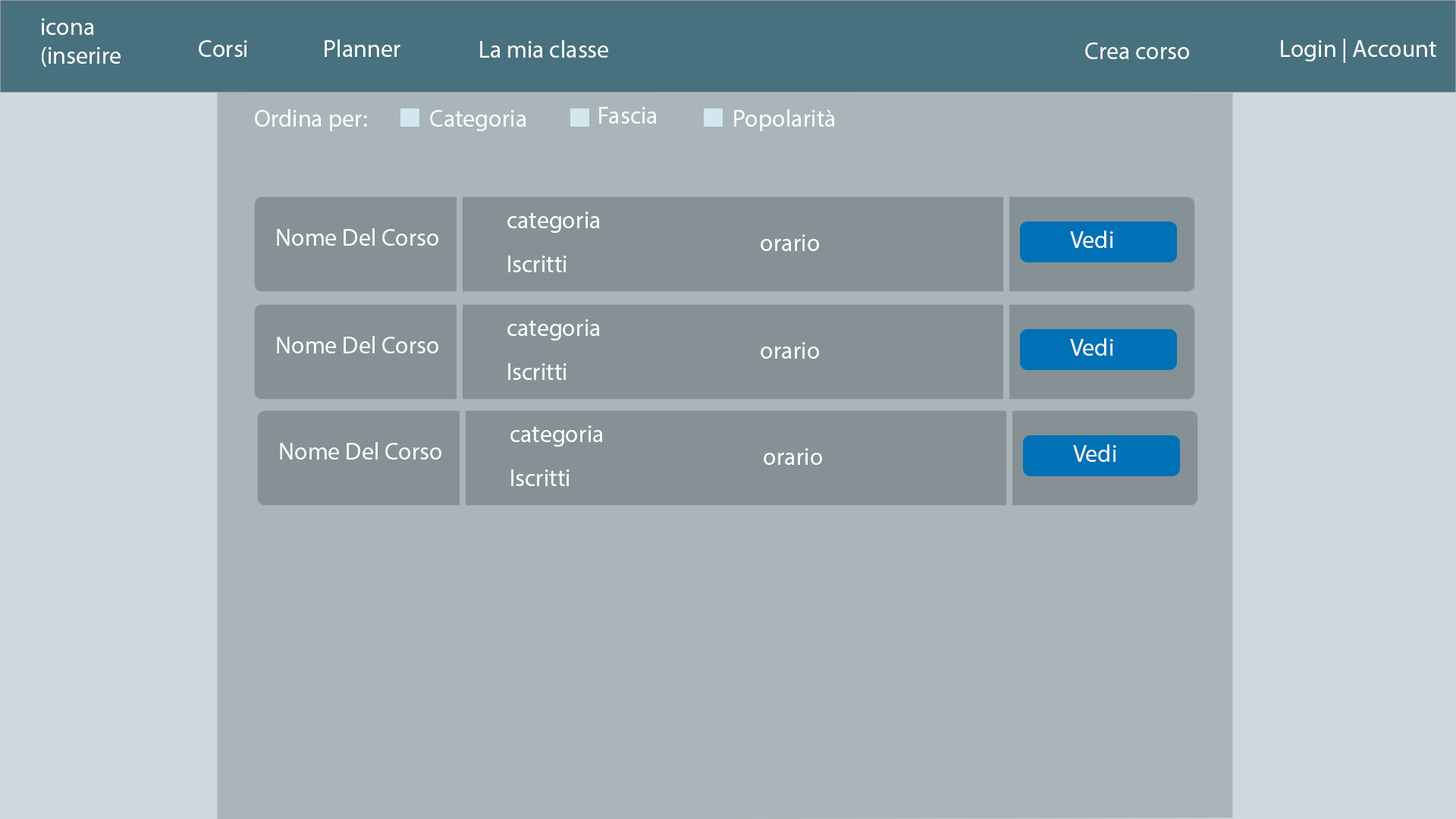
<style>
.page{position:relative;width:1456px;height:819px;background:#a9b5b8}
.page>*{position:absolute;margin:0}
.t1{font:24.3px "MyriadPro-Regular";color:#ffffff}
</style>
<div class="page">
<p class="t1" style="left:42px;top:18px;width:79px;height:49px">icona (inserire</p>
<p class="t1" style="left:199px;top:40px;width:48px;height:17px">Corsi</p>
<p class="t1" style="left:325px;top:39px;width:75px;height:18px">Planner</p>
<p class="t1" style="left:480px;top:40px;width:128px;height:18px">La mia classe</p>
<p class="t1" style="left:1281px;top:39px;width:155px;height:24px">Login | Account</p>
<p class="t1" style="left:1085px;top:42px;width:104px;height:17px">Crea corso</p>
<p class="t1" style="left:255px;top:109px;width:112px;height:22px">Ordina per:</p>
<p class="t1" style="left:430px;top:110px;width:96px;height:21px">Categoria</p>
<p class="t1" style="left:599px;top:107px;width:58px;height:17px">Fascia</p>
<p class="t1" style="left:734px;top:109px;width:101px;height:22px">Popolarità</p>
<p class="t1" style="left:507px;top:212px;width:93px;height:21px">categoria</p>
<p class="t1" style="left:277px;top:228px;width:161px;height:18px">Nome Del Corso<br><br>N§N</p>
<p class="t1" style="left:1070px;top:231px;width:43px;height:17px">Vedi</p>
<p class="t1" style="left:761px;top:234px;width:58px;height:17px">orario</p>
<p class="t1" style="left:508px;top:256px;width:58px;height:16px">Iscritti</p>
<p class="t1" style="left:507px;top:319px;width:93px;height:21px">categoria</p>
<p class="t1" style="left:277px;top:336px;width:161px;height:17px">Nome Del Corso<br><br>N§N</p>
<p class="t1" style="left:1070px;top:338px;width:43px;height:18px">Vedi</p>
<p class="t1" style="left:761px;top:342px;width:58px;height:17px">orario</p>
<p class="t1" style="left:508px;top:363px;width:58px;height:17px">Iscritti</p>
<p class="t1" style="left:510px;top:425px;width:93px;height:22px">categoria</p>
<p class="t1" style="left:280px;top:442px;width:161px;height:18px">Nome Del Corso<br><br>N§N</p>
<p class="t1" style="left:764px;top:448px;width:58px;height:17px">orario</p>
<p class="t1" style="left:1073px;top:444px;width:43px;height:18px">Vedi</p>
<p class="t1" style="left:511px;top:469px;width:59px;height:17px">Iscritti</p>
</div>
